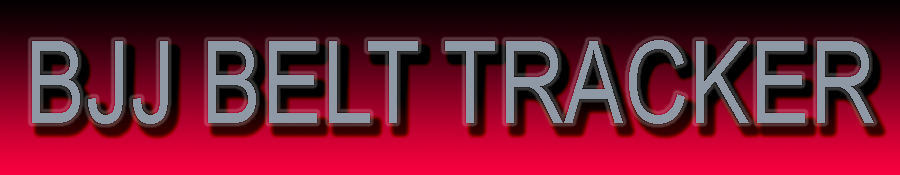
<style>
.page{position:relative;width:900px;height:175px}
.page>*{position:absolute;margin:0}
.t1{font:114.1px "ArialNarrow";color:#8f99a5;scale:0.97 1}
</style>
<div class="page">
<p class="t1" style="left:32px;top:40px;width:842px;height:84px">BJJ BELT TRACKER</p>
</div>
